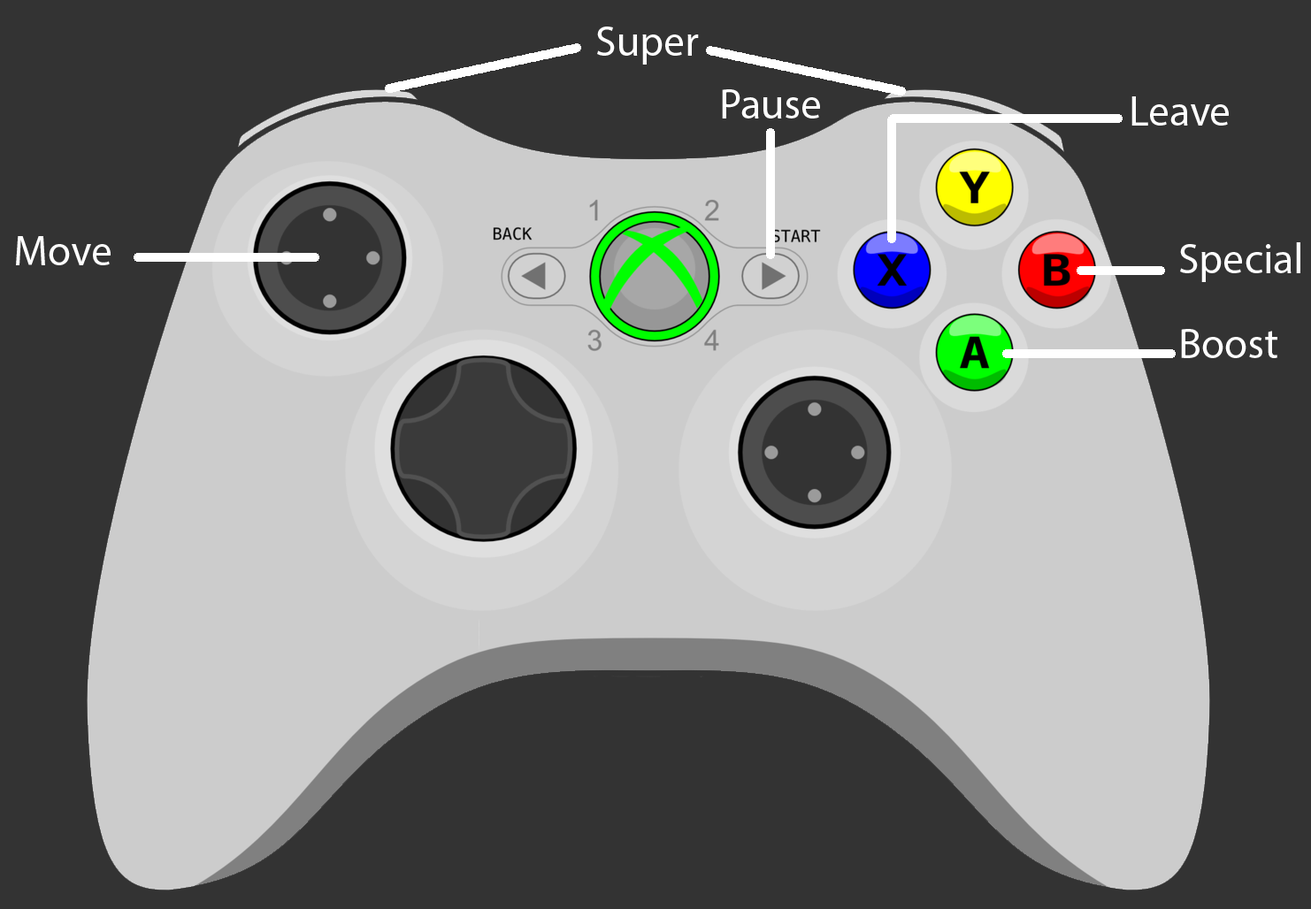
<style>
.page{position:relative;width:1311px;height:909px;background:#333333}
.page>*{position:absolute;margin:0}
.t1{font:42.5px "MyriadPro-Regular";color:#ffffff}
</style>
<div class="page">
<p class="t1" style="left:597px;top:27px;width:102px;height:38px">Super</p>
<p class="t1" style="left:722px;top:89px;width:98px;height:30px">Pause</p>
<p class="t1" style="left:1132px;top:96px;width:97px;height:30px">Leave</p>
<p class="t1" style="left:16px;top:236px;width:95px;height:29px">Move</p>
<p class="t1" style="left:1180px;top:242px;width:121px;height:40px">Special</p>
<p class="t1" style="left:1181px;top:329px;width:97px;height:29px">Boost</p>
</div>
